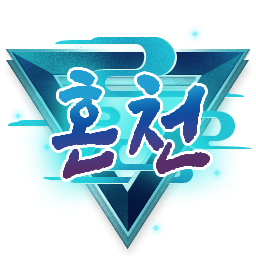
<style>
.page{position:relative;width:256px;height:256px;background:#ffffff}
.page>*{position:absolute;margin:0}
.t1{font:107.2px "SangSangRockOTF";letter-spacing:0.1em;scale:0.93 1}
</style>
<div class="page">
<p class="t1" style="left:53px;top:71px;width:156px;height:107px">혼천</p>
</div>
